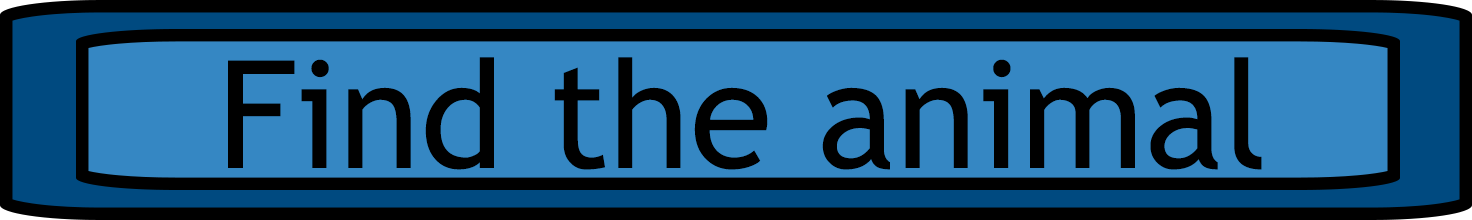
<style>
.page{position:relative;width:1472px;height:220px;background:#3587c3}
.page>*{position:absolute;margin:0}
.t1{font:150px "TrebuchetMS";color:#000000}
</style>
<div class="page">
<p class="t1" style="left:228px;top:57px;width:1034px;height:113px">Find the animal</p>
</div>
